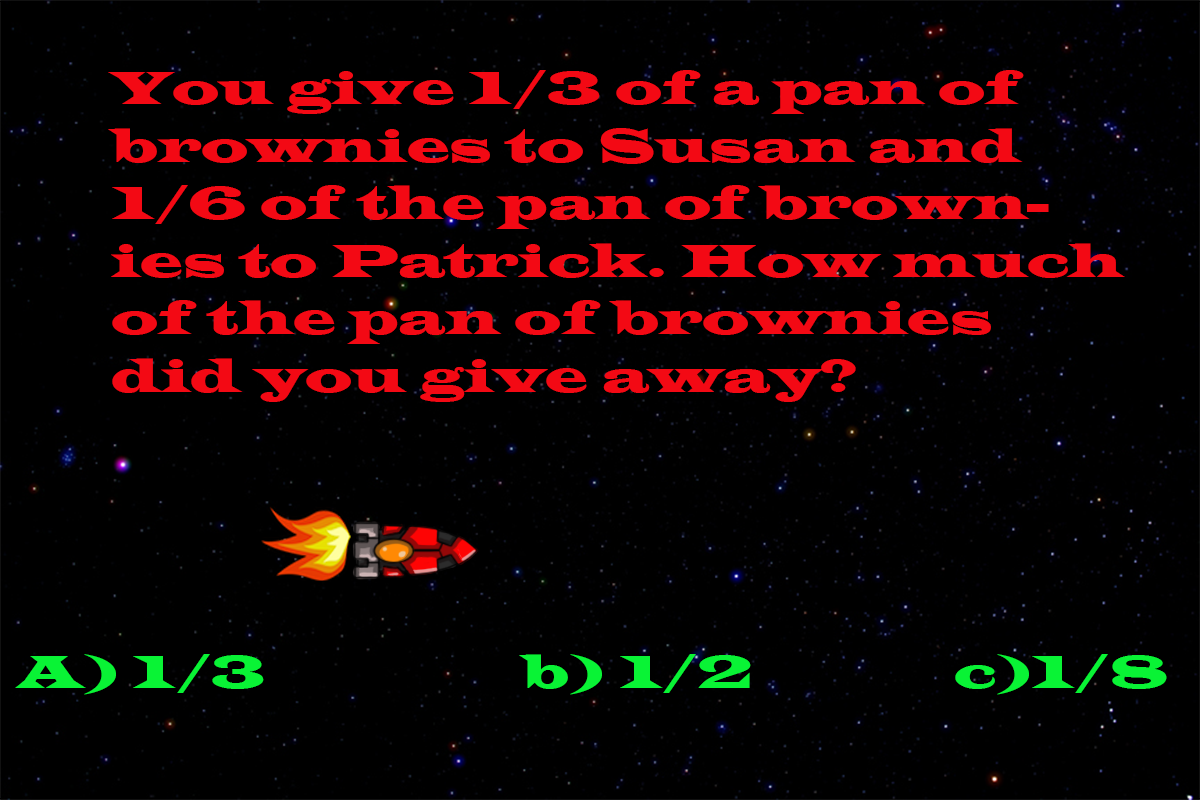
<style>
.page{position:relative;width:1200px;height:800px;background:#000000}
.page>*{position:absolute;margin:0}
.t1{font:48px "LatinWide";color:#f30914}
.t2{font:48px "LatinWide";color:#09f335}
</style>
<div class="page">
<p class="t1" style="left:108px;top:70px;width:1017px;height:332px">You give 1/3 of a pan of brownies to Susan and 1/6 of the pan of brownies to Patrick. How much of the pan of brownies did you give away?</p>
<p class="t2" style="left:15px;top:654px;width:1152px;height:41px">A) 1/3        b) 1/2       c)1/8</p>
</div>
